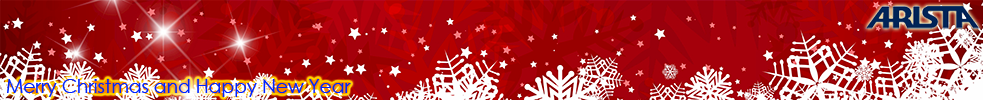
<style>
.page{position:relative;width:983px;height:100px}
.page>*{position:absolute;margin:0}
.t1{font:18.7px "CenturyGothic";color:#0024ff}
</style>
<div class="page">
<p class="t1" style="left:7px;top:79px;width:344px;height:18px">Merry Christmas and Happy New Year</p>
</div>
